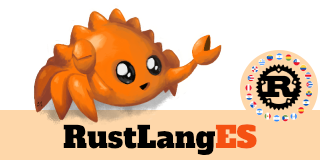
<style>
.page{position:relative;width:320px;height:160px;background:#ffffff}
.page>*{position:absolute;margin:0}
.t1{font:30px "AlfaSlabOne-Regular";color:#000000}
.t2{font:30px "AlfaSlabOne-Regular";color:#f55112}
</style>
<div class="page">
<p class="t1" style="left:63px;top:124px;width:194px;height:32px">RustLang<span class="t2">ES</span></p>
</div>
